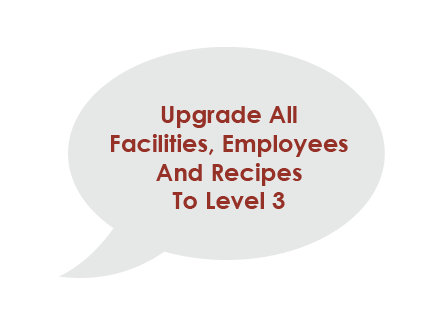
<style>
.page{position:relative;width:444px;height:330px;background:#ffffff}
.page>*{position:absolute;margin:0}
.t1{font:24px "CenturyGothic-Bold";color:#953127}
</style>
<div class="page">
<p class="t1" style="left:111px;top:106px;width:237px;height:103px;text-align:center">Upgrade All<br>Facilities, Employees<br>And Recipes<br>To Level 3</p>
</div>
